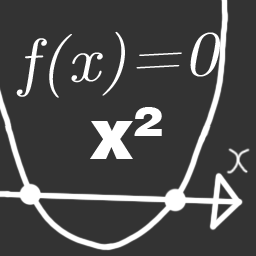
<style>
.page{position:relative;width:256px;height:256px;background:#333333}
.page>*{position:absolute;margin:0}
.t1{font:63.1px "CMUClassicalSerif-Italic";color:#ffffff;scale:1.11 1}
.t2{font:70.2px "HelveticaBlack";color:#ffffff}
</style>
<div class="page">
<p class="t1" style="left:16px;top:31px;width:204px;height:67px;rotate:-3deg">f(x)=0</p>
<p class="t2" style="left:90px;top:107px;width:72px;height:52px">x²</p>
</div>
